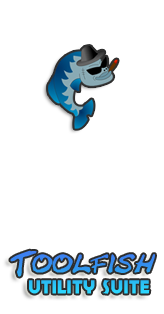
<style>
.page{position:relative;width:164px;height:314px;background:#ffffff}
.page>*{position:absolute;margin:0}
.t1{font:18px "GoyaHeavy";letter-spacing:-0.025em}
.t2{font:26px "CrackedJohnnie";letter-spacing:-0.025em}
</style>
<div class="page">
<p class="t1" style="left:10px;top:250px;width:145px;height:44px;text-align:center"><span class="t2">Toolfish <br></span>Utility Suite</p>
</div>
